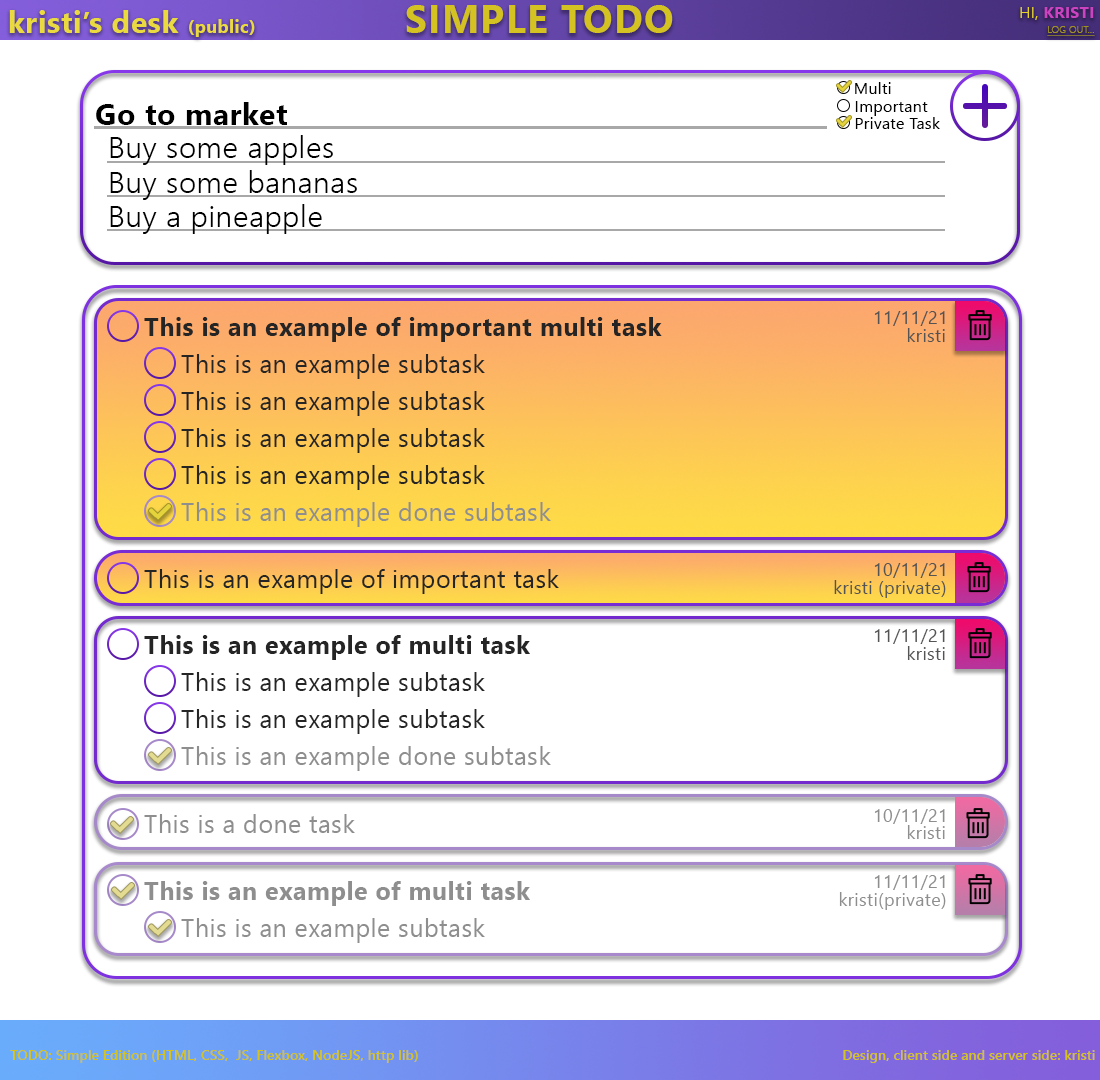
<style>
.page{position:relative;width:1100px;height:1080px;background:#ffffff}
.page>*{position:absolute;margin:0}
.t1{font:39px "SegoeUI-Bold";letter-spacing:0.03em;color:#d4c222;text-transform:uppercase}
.t2{font:30px "SegoeUI-Bold";letter-spacing:0.02em;color:#ead93f}
.t3{font:18px "SegoeUI-Bold";letter-spacing:0.02em;color:#ead93f}
.t4{font:10px/15px "SegoeUI-Light";letter-spacing:0.015em;color:#a1931d;text-transform:uppercase;text-decoration:underline}
.t5{font:16px/15px "SegoeUI-Semilight";letter-spacing:0.02em;color:#e6d229;text-transform:uppercase}
.t6{font:16px/15px "SegoeUI-Bold";letter-spacing:0.02em;color:#cb43c0;text-transform:uppercase}
.t7{font:16px "SegoeUI";letter-spacing:0.02em;color:#010101}
.t8{font:30px "SegoeUI-Bold";letter-spacing:0.02em;color:#000000}
.t9{font:30px "SegoeUI-Semilight";letter-spacing:0.02em;color:#000000}
.t10{font:25px "SegoeUI-Bold";letter-spacing:0.02em;color:#252525}
.t11{font:18px "SegoeUI";letter-spacing:0.02em;color:#545454}
.t12{font:25px "SegoeUI";letter-spacing:0.02em;color:#252525}
.t13{font:25px "SegoeUI";letter-spacing:0.02em;color:#8e8e8e}
.t14{font:18px "SegoeUI";letter-spacing:0.02em;color:#8e8e8e}
.t15{font:25px "SegoeUI-Bold";letter-spacing:0.02em;color:#8e8e8e}
.t16{font:14px "SegoeUI-Semibold";color:#d4c222}
</style>
<div class="page">
<p class="t1" style="left:406px;top:5px;width:267px;height:28px">Simple TODO</p>
<p class="t2" style="left:9px;top:10px;width:246px;height:27px">kristi’s desk <span class="t3">(public)</span></p>
<p class="t4" style="left:1020px;top:7px;width:75px;height:29px;text-align:right"><span class="t5">Hi, </span><span class="t6">KRisti<br></span>Log out...</p>
<p class="t7" style="left:855px;top:82px;width:36px;height:12px">Multi</p>
<p class="t8" style="left:96px;top:102px;width:191px;height:23px">Go to market</p>
<p class="t7" style="left:855px;top:101px;width:73px;height:15px">Important</p>
<p class="t7" style="left:855px;top:117px;width:85px;height:12px">Private Task</p>
<p class="t9" style="left:110px;top:135px;width:223px;height:30px">Buy some apples</p>
<p class="t9" style="left:110px;top:170px;width:247px;height:30px">Buy some bananas</p>
<p class="t9" style="left:110px;top:204px;width:212px;height:30px">Buy a pineapple</p>
<p class="t10" style="left:144px;top:317px;width:518px;height:25px">This is an example of important multi task</p>
<p class="t11" style="left:874px;top:311px;width:71px;height:15px">11/11/21</p>
<p class="t11" style="left:907px;top:328px;width:38px;height:14px">kristi</p>
<p class="t12" style="left:181px;top:354px;width:304px;height:25px">This is an example subtask</p>
<p class="t12" style="left:181px;top:391px;width:304px;height:25px">This is an example subtask</p>
<p class="t12" style="left:181px;top:428px;width:304px;height:25px">This is an example subtask</p>
<p class="t12" style="left:181px;top:465px;width:304px;height:25px">This is an example subtask</p>
<p class="t13" style="left:181px;top:502px;width:370px;height:25px">This is an example done subtask</p>
<p class="t12" style="left:144px;top:569px;width:415px;height:25px">This is an example of important task</p>
<p class="t11" style="left:874px;top:563px;width:71px;height:15px">10/11/21</p>
<p class="t11" style="left:834px;top:580px;width:112px;height:18px">kristi (private)</p>
<p class="t11" style="left:874px;top:629px;width:71px;height:15px">11/11/21</p>
<p class="t10" style="left:144px;top:635px;width:386px;height:25px">This is an example of multi task</p>
<p class="t11" style="left:907px;top:646px;width:38px;height:14px">kristi</p>
<p class="t12" style="left:181px;top:672px;width:304px;height:25px">This is an example subtask</p>
<p class="t12" style="left:181px;top:709px;width:304px;height:25px">This is an example subtask</p>
<p class="t13" style="left:181px;top:746px;width:370px;height:25px">This is an example done subtask</p>
<p class="t14" style="left:874px;top:809px;width:71px;height:15px">10/11/21</p>
<p class="t13" style="left:144px;top:814px;width:211px;height:19px">This is a done task</p>
<p class="t14" style="left:907px;top:825px;width:38px;height:14px">kristi</p>
<p class="t15" style="left:144px;top:881px;width:386px;height:25px">This is an example of multi task</p>
<p class="t14" style="left:874px;top:875px;width:71px;height:15px">11/11/21</p>
<p class="t14" style="left:839px;top:892px;width:107px;height:18px">kristi(private)</p>
<p class="t13" style="left:181px;top:918px;width:304px;height:25px">This is an example subtask</p>
<p class="t16" style="left:10px;top:1050px;width:408px;height:13px">TODO: Simple Edition (HTML, CSS,  JS, Flexbox, NodeJS, http lib)</p>
<p class="t16" style="left:843px;top:1050px;width:252px;height:13px">Design, client side and server side: kristi</p>
</div>
